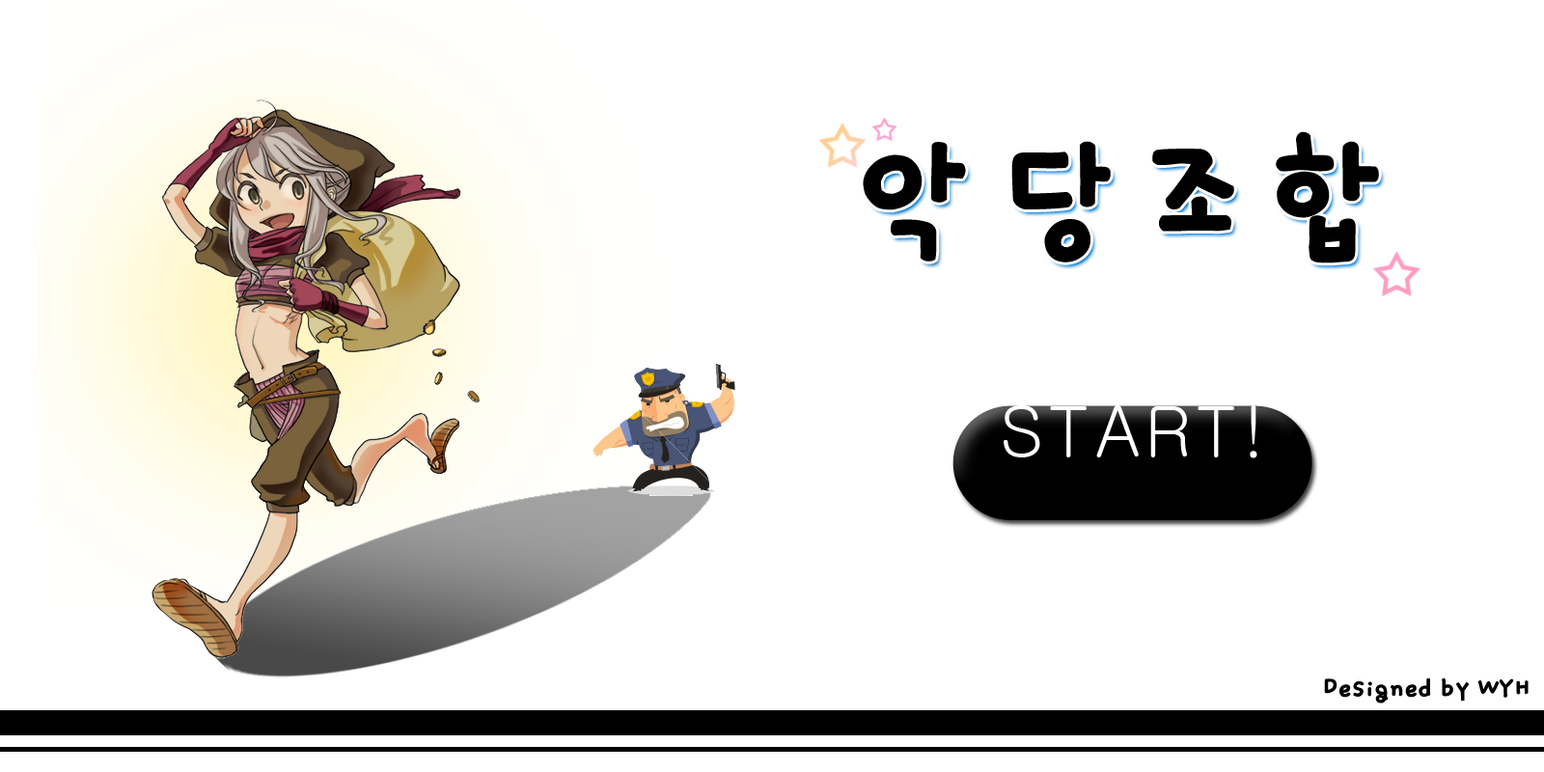
<style>
.page{position:relative;width:1544px;height:772px;background:#ffffff}
.page>*{position:absolute;margin:0}
.t1{font:144.8px "Dgyoung";letter-spacing:0.25em;color:#000000;font-weight:bold}
.t2{font:69.5px "Gulim";letter-spacing:0.075em;color:#ffffff}
.t3{font:29px "Dgyoung";color:#000000;font-weight:bold}
</style>
<div class="page">
<p class="t1" style="left:863px;top:131px;width:516px;height:132px">악당조합</p>
<p class="t2" style="left:1004px;top:405px;width:254px;height:53px">START!</p>
<p class="t3" style="left:1324px;top:678px;width:205px;height:26px">Designed by WYH</p>
</div>
